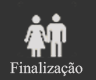
<style>
.page{position:relative;width:96px;height:80px;background:#333333}
.page>*{position:absolute;margin:0}
.t1{font:24.1px "AngsanaUPC";color:#dddbdb}
</style>
<div class="page">
<p class="t1" style="left:10px;top:61px;width:73px;height:16px">Finalização</p>
</div>
